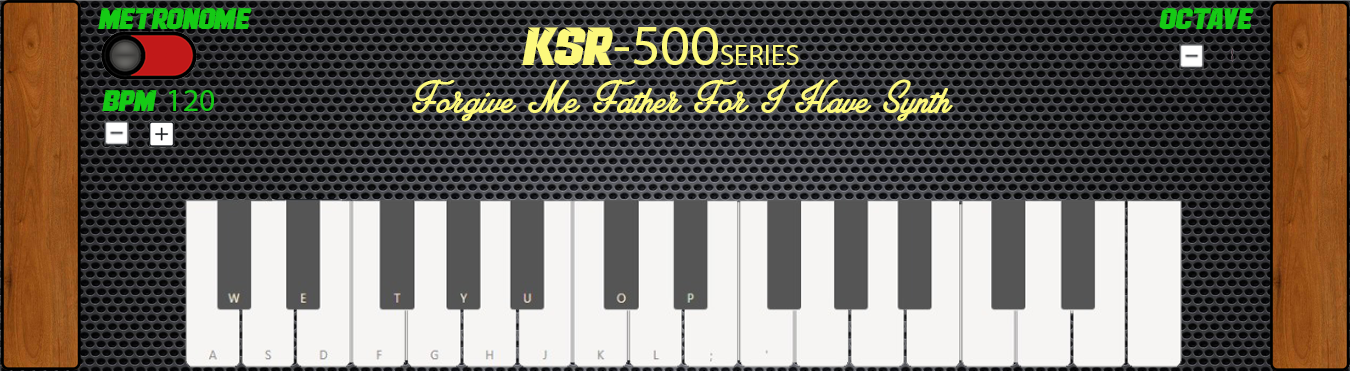
<style>
.page{position:relative;width:1350px;height:371px}
.page>*{position:absolute;margin:0}
.t1{font:32px "Therace";color:#15ca15}
.t2{font:29px "MyriadPro-Regular";color:#fcf87c}
.t3{font:58px "Therace";color:#fcf87c}
.t4{font:58px "MyriadPro-Regular";color:#fcf87c}
.t5{font:48px "AmplifyPersonalUseOnly";color:#fcf87c}
.t6{font:32px "MyriadPro-Regular";color:#15ca15}
</style>
<div class="page">
<p class="t1" style="left:97px;top:8px;width:155px;height:21px">METRONOME</p>
<p class="t1" style="left:1159px;top:8px;width:95px;height:21px">OCTAVE</p>
<p class="t2" style="left:521px;top:27px;width:278px;height:38px"><span class="t3">KSR</span><span class="t4">-500</span>SERIES</p>
<p class="t5" style="left:412px;top:79px;width:541px;height:43px">Forgive Me Father For I Have Synth</p>
<p class="t1" style="left:101px;top:90px;width:113px;height:21px">BPM <span class="t6">120</span></p>
</div>
